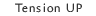
<style>
.page{position:relative;width:96px;height:16px;background:#ffffff}
.page>*{position:absolute;margin:0}
.t1{font:12px "Amira-Light";letter-spacing:0.1em;color:#333333}
</style>
<div class="page">
<p class="t1" style="left:15px;top:3px;width:67px;height:10px">Tension UP</p>
</div>
